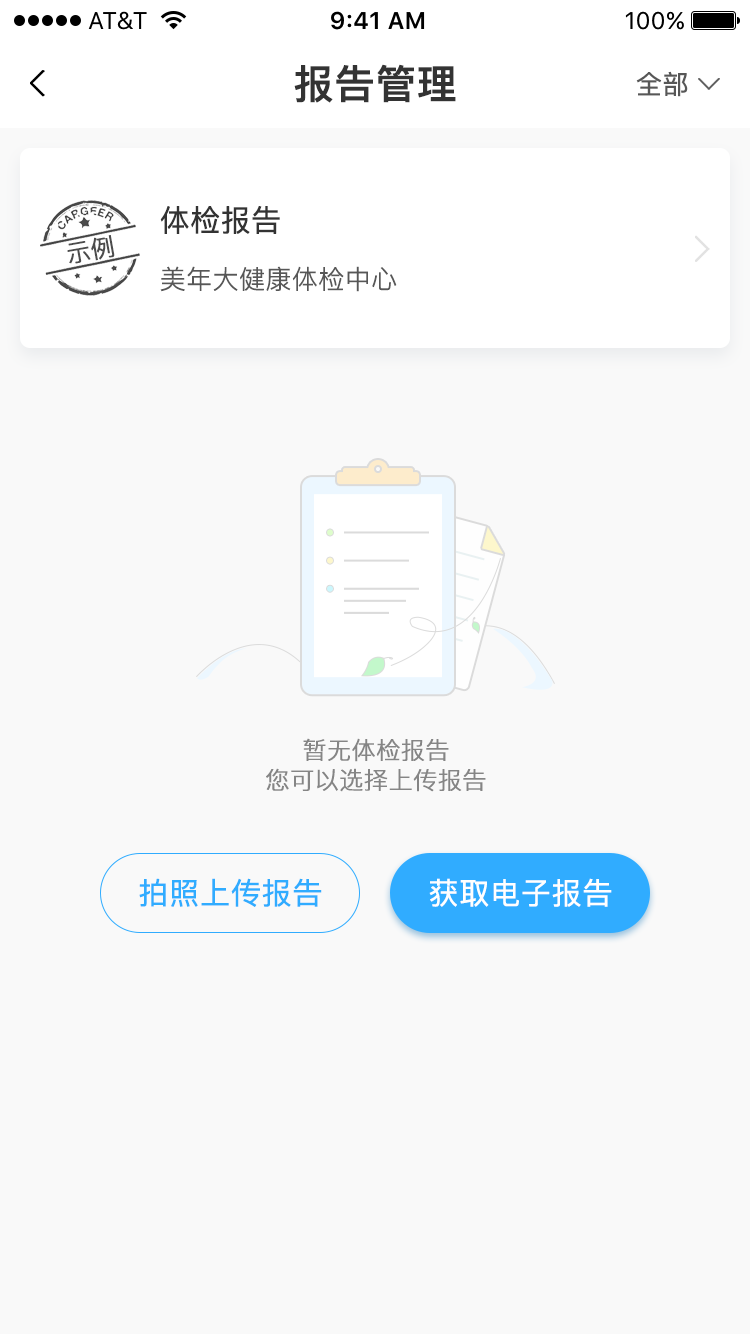
<style>
.page{position:relative;width:750px;height:1334px;background:#f9f9f9}
.page>*{position:absolute;margin:0}
.t1{font:40px "PingFangSC-Medium";color:#333333;font-weight:bold}
.t2{font:26px "PingFangSC-Regular";color:#575757;font-weight:bold}
.t3{font:30px "PingFangSC-Regular";color:#333333;font-weight:bold}
.t4{font:24px "PingFangSC-Light";color:#4c4c4c;font-weight:bold}
.t5{font:26px "PingFangSC-Light";color:#575757;font-weight:bold}
.t6{font:24px/30px "PingFangSC-Light";color:#858585;font-weight:bold}
.t7{font:30px "PingFangSC-Regular";color:#30acff;font-weight:bold}
.t8{font:30px "PingFangSC-Regular";color:#ffffff;font-weight:bold}
</style>
<div class="page">
<p class="t1" style="left:294px;top:64px;width:162px;height:39px">报告管理</p>
<p class="t2" style="left:636px;top:71px;width:52px;height:26px">全部</p>
<p class="t3" style="left:160px;top:206px;width:120px;height:28px">体检报告</p>
<p class="t4" style="left:67px;top:235px;width:48px;height:29px;rotate:-10deg">示例</p>
<p class="t5" style="left:160px;top:266px;width:237px;height:26px">美年大健康体检中心</p>
<p class="t6" style="left:266px;top:738px;width:220px;height:54px;text-align:center">暂无体检报告<br>您可以选择上传报告</p>
<p class="t7" style="left:139px;top:878px;width:183px;height:29px">拍照上传报告</p>
<p class="t8" style="left:429px;top:878px;width:183px;height:29px">获取电子报告</p>
</div>
